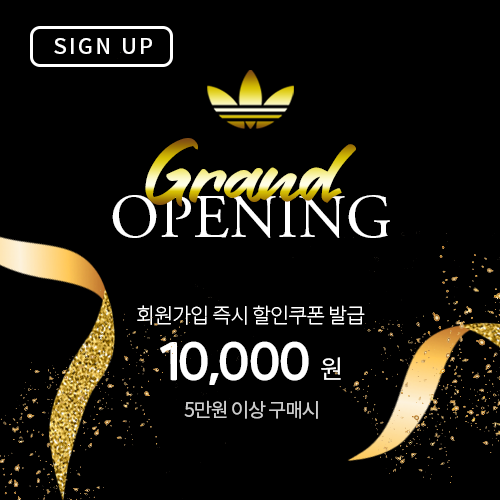
<style>
.page{position:relative;width:500px;height:500px;background:#000000}
.page>*{position:absolute;margin:0}
.t1{font:21px "NotoSansKR-Medium";letter-spacing:0.1em;color:#ffffff;scale:1.04 1}
.t2{font:92.4px "Friend-Write"}
.t3{font:61.6px "AGaramondPro-Regular";color:#ffffff}
.t4{font:20.8px "NotoSansKR-Light";letter-spacing:-0.05em;color:#ffffff}
.t5{font:50px "CookieRun-Regular";letter-spacing:-0.05em;color:#ffffff}
.t6{font:25px "NotoSansKR-Regular";letter-spacing:-0.05em;color:#ffffff}
.t7{font:19.4px "NotoSansKR-Regular";letter-spacing:-0.05em;color:#cccccc}
</style>
<div class="page">
<p class="t1" style="left:54px;top:38px;width:98px;height:16px">SIGN UP</p>
<p class="t2" style="left:145px;top:138px;width:211px;height:69px">Grand</p>
<p class="t3" style="left:112px;top:195px;width:278px;height:43px">OPENING</p>
<p class="t4" style="left:137px;top:305px;width:228px;height:20px">회원가입 즉시 할인쿠폰 발급</p>
<p class="t5" style="left:160px;top:341px;width:181px;height:44px">10,000 <span class="t6">원</span></p>
<p class="t7" style="left:184px;top:400px;width:134px;height:19px">5만원 이상 구매시</p>
</div>
